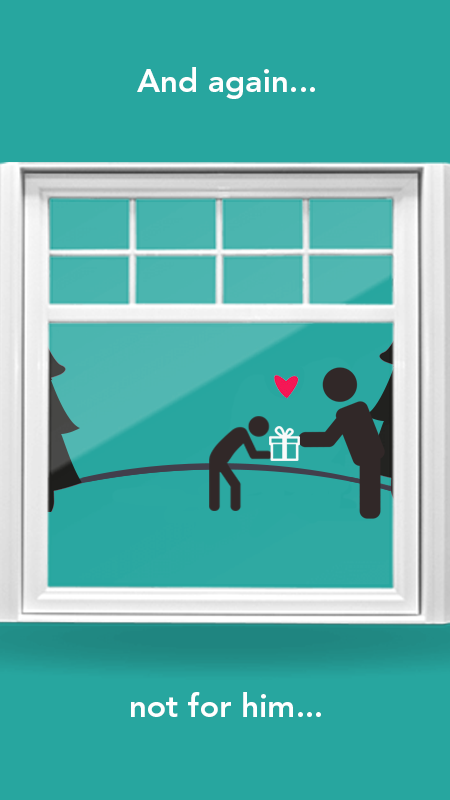
<style>
.page{position:relative;width:450px;height:800px;background:#27a69f}
.page>*{position:absolute;margin:0}
.t1{font:32px "AvenirLTStd-Heavy";color:#ffffff}
</style>
<div class="page">
<p class="t1" style="left:137px;top:67px;width:178px;height:32px">And again...</p>
<p class="t1" style="left:131px;top:692px;width:190px;height:25px">not for him...</p>
</div>
